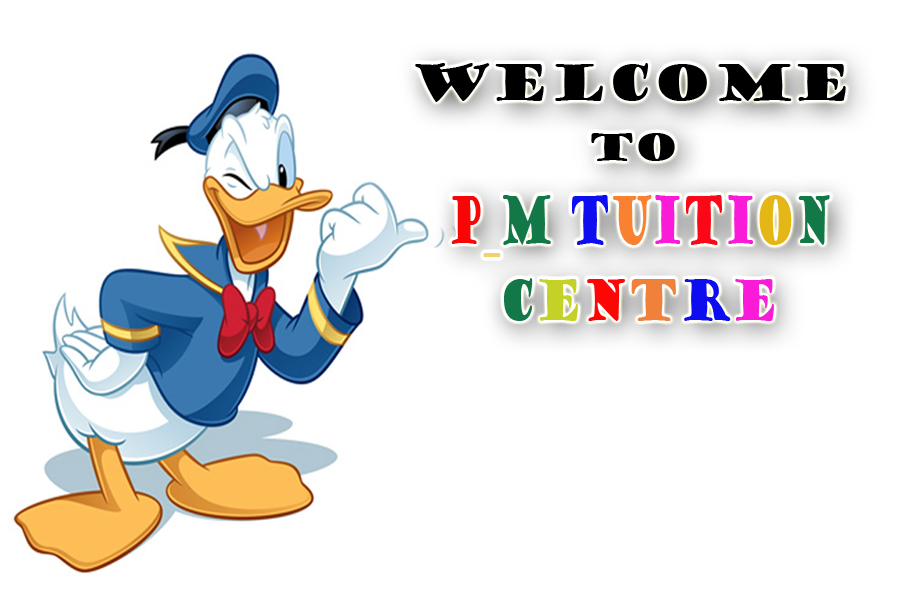
<style>
.page{position:relative;width:900px;height:600px;background:#ffffff}
.page>*{position:absolute;margin:0}
.t1{font:48px "GoudyStout";color:#000000}
.t2{font:36px "GoudyStout";color:#000000}
.t3{font:63.8px "GoudyStout";color:#f80606;scale:0.5 1}
.t4{font:63.8px "GoudyStout";color:#efd36f;scale:0.5 1}
.t5{font:63.8px "GoudyStout";color:#137847;scale:0.5 1}
.t6{font:63.8px "GoudyStout";color:#0d0df0;scale:0.5 1}
.t7{font:63.8px "GoudyStout";color:#fa8131;scale:0.5 1}
.t8{font:63.8px "GoudyStout";color:#f91bd7;scale:0.5 1}
.t9{font:63.8px "GoudyStout";color:#fa0718;scale:0.5 1}
.t10{font:63.8px "GoudyStout";color:#e5b716;scale:0.5 1}
.t11{font:55.4px "GoudyStout";color:#137847;scale:0.7 1}
.t12{font:55.4px "GoudyStout";color:#c4d227;scale:0.7 1}
.t13{font:55.4px "GoudyStout";color:#ff0606;scale:0.7 1}
.t14{font:55.4px "GoudyStout";color:#ef8139;scale:0.7 1}
.t15{font:55.4px "GoudyStout";color:#0d0df0;scale:0.7 1}
.t16{font:55.4px "GoudyStout";color:#f91bd7;scale:0.7 1}
</style>
<div class="page">
<p class="t1" style="left:415px;top:63px;width:431px;height:39px">WELCOME</p>
<p class="t2" style="left:591px;top:133px;width:84px;height:28px">TO</p>
<p class="t3" style="left:451px;top:195px;width:379px;height:62px">P<span class="t4">_</span><span class="t5">M </span><span class="t6">T</span><span class="t7">U</span><span class="t8">I</span><span class="t9">T</span><span class="t8">I</span><span class="t10">O</span><span class="t5">N</span></p>
<p class="t11" style="left:504px;top:278px;width:270px;height:43px">C<span class="t12">E</span><span class="t13">N</span><span class="t14">T</span><span class="t15">R</span><span class="t16">E</span></p>
</div>
